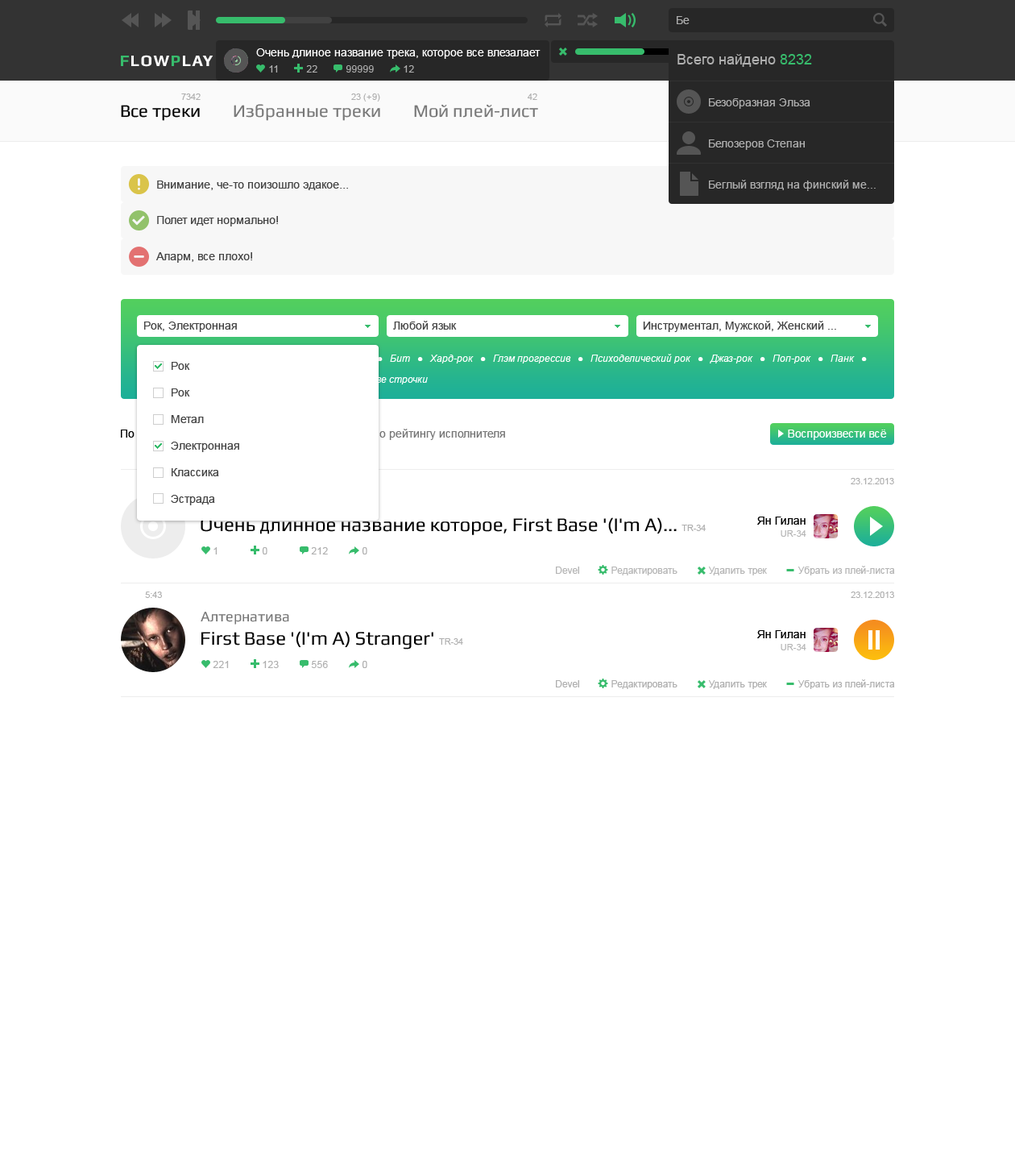
<style>
.page{position:relative;width:1015px;height:1175px;background:#ffffff}
.page>*{position:absolute;margin:0}
.t1{font:11.3px "ArialMT";color:#afafaf}
.t2{font:11.3px "ArialMT";color:#ffffff}
.t3{font:14.5px "ArialMT";color:#afafaf}
.t4{font:14.5px "ArialMT";color:#37bc6c}
.t5{font:16.1px "Play-Bold";letter-spacing:0.05em;color:#ffffff;text-transform:uppercase}
.t6{font:16.1px "Play-Bold";letter-spacing:0.05em;color:#37bc6c;text-transform:uppercase}
.t7{font:9.7px "ArialMT";color:#afafaf}
.t8{font:8.9px "ArialMT";color:#afafaf}
.t9{font:17.7px "Play";color:#777777}
.t10{font:17.7px "Play";color:#000000}
.t11{font:11.3px "ArialMT";color:#444444}
.t12{font:9.7px/20.9px "Arial-ItalicMT";color:#ffffff}
.t13{font:9.7px/17.7px "Arial-ItalicMT";color:#ffffff}
.t14{font:11.3px/26.6px "ArialMT";color:#444444}
.t15{font:11.3px "ArialMT"}
.t16{font:19.3px "Play";color:#000000}
.t17{font:11.3px/12.1px "ArialMT";color:#000000}
.t18{font:8.9px/12.1px "ArialMT";color:#b5b5b5}
.t19{font:9.7px "ArialMT";color:#b5b5b5}
.t20{font:14.5px "Play";color:#777777}
</style>
<div class="page">
<p class="t1" style="left:677px;top:16px;width:13px;height:8px">Бе</p>
<p class="t2" style="left:256px;top:48px;width:285px;height:11px">Очень длиное название трека, которое все влезалает</p>
<p class="t3" style="left:678px;top:54px;width:134px;height:13px">Всего найдено <span class="t4">8232</span></p>
<p class="t5" style="left:121px;top:55px;width:93px;height:12px"><span class="t6">F</span>low<span class="t6">p</span>lay</p>
<p class="t7" style="left:269px;top:65px;width:9px;height:8px">11</p>
<p class="t7" style="left:306px;top:65px;width:11px;height:8px">22</p>
<p class="t7" style="left:346px;top:65px;width:28px;height:8px">99999</p>
<p class="t7" style="left:404px;top:65px;width:10px;height:8px">12</p>
<p class="t8" style="left:181px;top:93px;width:20px;height:7px">7342</p>
<p class="t8" style="left:351px;top:93px;width:29px;height:9px">23 (+ 9)</p>
<p class="t8" style="left:528px;top:93px;width:9px;height:7px">42</p>
<p class="t1" style="left:709px;top:98px;width:101px;height:11px">Безобразная Эльза</p>
<p class="t9" style="left:121px;top:104px;width:417px;height:17px"><span class="t10">Все треки        </span>Избранные треки        Мой плей-лист</p>
<p class="t1" style="left:709px;top:139px;width:96px;height:11px">Белозеров Степан</p>
<p class="t11" style="left:157px;top:180px;width:191px;height:10px">Внимание, че-то поизошло эдакое...</p>
<p class="t1" style="left:709px;top:180px;width:167px;height:11px">Беглый взгляд на финский ме...</p>
<p class="t11" style="left:157px;top:216px;width:121px;height:10px">Полет идет нормально!</p>
<p class="t11" style="left:155px;top:252px;width:97px;height:11px">Аларм, все плохо!</p>
<p class="t11" style="left:144px;top:321px;width:93px;height:11px">Рок, Электронная</p>
<p class="t11" style="left:393px;top:321px;width:64px;height:9px">Любой язык</p>
<p class="t11" style="left:643px;top:321px;width:193px;height:11px">Инструментал, Мужской, Женский ...</p>
<p class="t12" style="left:137px;top:354px;width:730px;height:30px">Рок-н-ролл<span class="t13">   ●   </span>Ритм-энд-блюз<span class="t13">   ●   </span>Фолк<span class="t13">   ●   </span>Серф<span class="t13">   ●   </span>Бит<span class="t13">   ●   </span>Хард-рок<span class="t13">   ●   </span>Глэм прогрессив<span class="t13">   ●   </span>Психоделический рок<span class="t13">   ●   </span>Джаз-рок<span class="t13">   ●   </span>Поп-рок<span class="t13">   ●   </span>Панк<span class="t13">   ●   <br></span>Блюз<span class="t13">   ●   </span>Треш<span class="t13">   ●   </span>Психоделический рок -- одна и две строчки</p>
<p class="t14" style="left:171px;top:362px;width:68px;height:143px">Рок<br>Рок<br>Метал<br>Электронная<br>Классика<br>Эстрада</p>
<p class="t15" style="left:121px;top:429px;width:384px;height:11px">По дате добавления        По популярности        По рейтингу исполнителя</p>
<p class="t2" style="left:788px;top:429px;width:99px;height:11px">Воспроизвести всё</p>
<p class="t8" style="left:851px;top:478px;width:43px;height:6px">23.12.2013</p>
<p class="t16" style="left:201px;top:517px;width:505px;height:18px">Очень длинное название которое, First Base '(I'm A)... <span class="t8">TR-34</span></p>
<p class="t17" style="left:757px;top:516px;width:49px;height:21px;text-align:right">Ян Гилан<br><span class="t18">UR-34</span></p>
<p class="t7" style="left:214px;top:547px;width:4px;height:7px">1</p>
<p class="t7" style="left:262px;top:547px;width:5px;height:7px">0</p>
<p class="t7" style="left:311px;top:547px;width:17px;height:7px">212</p>
<p class="t7" style="left:362px;top:547px;width:5px;height:7px">0</p>
<p class="t19" style="left:556px;top:566px;width:339px;height:9px">Devel           Редактировать           Удалить трек           Убрать из плей-листа</p>
<p class="t8" style="left:145px;top:591px;width:17px;height:7px">5:43</p>
<p class="t8" style="left:851px;top:591px;width:43px;height:7px">23.12.2013</p>
<p class="t20" style="left:201px;top:611px;width:88px;height:13px">Алтернатива</p>
<p class="t16" style="left:201px;top:631px;width:262px;height:18px">First Base '(I'm A) Stranger' <span class="t8">TR-34</span></p>
<p class="t17" style="left:757px;top:630px;width:49px;height:20px;text-align:right">Ян Гилан<br><span class="t18">UR-34</span></p>
<p class="t7" style="left:213px;top:661px;width:16px;height:7px">221</p>
<p class="t7" style="left:263px;top:661px;width:16px;height:7px">123</p>
<p class="t7" style="left:311px;top:661px;width:17px;height:7px">556</p>
<p class="t7" style="left:362px;top:661px;width:5px;height:7px">0</p>
<p class="t7" style="left:556px;top:679px;width:339px;height:10px">Devel           Редактировать           Удалить трек           Убрать из плей-листа</p>
</div>
